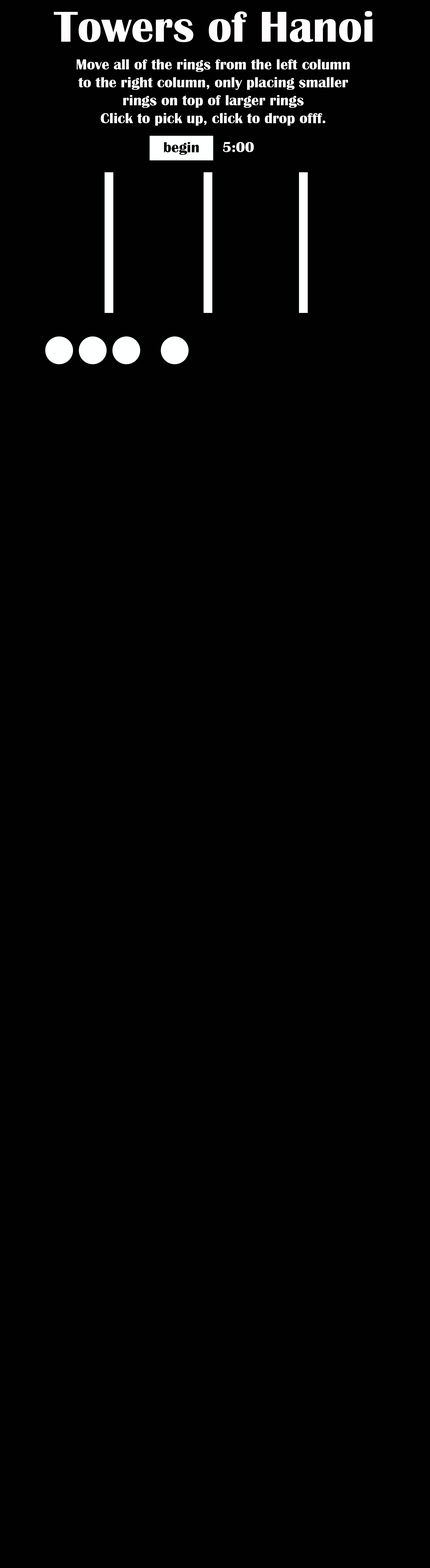
<style>
.page{position:relative;width:430px;height:1568px;background:#010101}
.page>*{position:absolute;margin:0}
.t1{font:44.8px "BritannicBold";color:#fefcfc}
.t2{font:14.9px "BritannicBold";color:#fefcfc}
.t3{font:14.9px "BritannicBold";color:#020202}
.t4{font:14.9px "BritannicBold";color:#fcfafb}
</style>
<div class="page">
<p class="t1" style="left:54px;top:11px;width:319px;height:31px">Towers of Hanoi</p>
<p class="t2" style="left:77px;top:59px;width:273px;height:67px;text-align:center">Move all of the rings from the left column<br>to the right column, only placing smaller<br>rings on top of larger rings<br>Click to pick up, click to drop offf.</p>
<p class="t3" style="left:164px;top:142px;width:35px;height:13px">begin</p>
<p class="t4" style="left:223px;top:142px;width:31px;height:10px">5:00</p>
</div>
